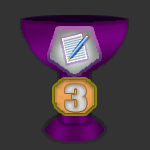
<style>
.page{position:relative;width:150px;height:150px;background:#333333}
.page>*{position:absolute;margin:0}
.t1{font:33.1px "Impact";color:#c7c6c0;scale:1.35 1}
</style>
<div class="page">
<p class="t1" style="left:65px;top:84px;width:22px;height:28px">3</p>
</div>
